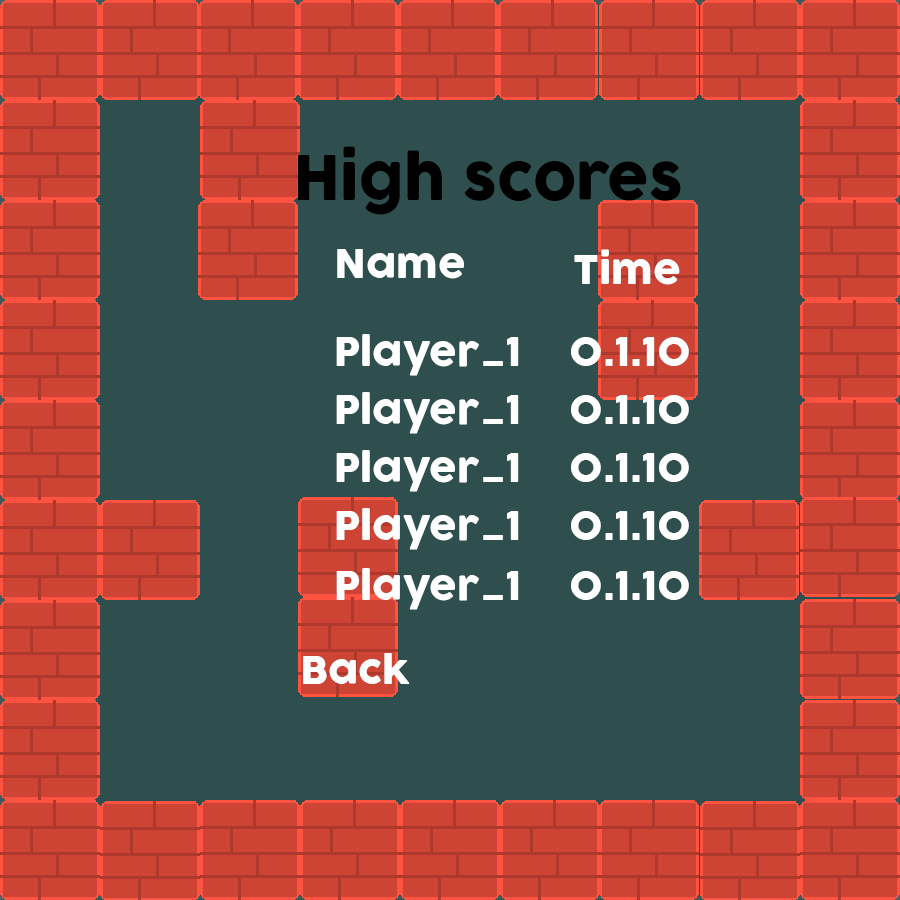
<style>
.page{position:relative;width:900px;height:900px;background:#2f4f4f}
.page>*{position:absolute;margin:0}
.t1{font:59.8px "COCOGOOSE";color:#000000}
.t2{font:38.8px "COCOGOOSE";color:#ffffff}
.t3{font:38.3px "COCOGOOSE";color:#ffffff}
</style>
<div class="page">
<p class="t1" style="left:297px;top:146px;width:384px;height:69px">High scores</p>
<p class="t2" style="left:337px;top:249px;width:127px;height:30px">Name</p>
<p class="t2" style="left:574px;top:249px;width:106px;height:36px">Time</p>
<p class="t2" style="left:336px;top:334px;width:353px;height:42px">Player_1  0.1.10</p>
<p class="t2" style="left:336px;top:392px;width:353px;height:42px">Player_1  0.1.10</p>
<p class="t2" style="left:336px;top:450px;width:353px;height:42px">Player_1  0.1.10</p>
<p class="t2" style="left:336px;top:508px;width:353px;height:42px">Player_1  0.1.10</p>
<p class="t2" style="left:336px;top:568px;width:353px;height:42px">Player_1  0.1.10</p>
<p class="t3" style="left:303px;top:653px;width:107px;height:31px">Back</p>
</div>
